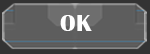
<style>
.page{position:relative;width:150px;height:54px;background:#5d5d5d}
.page>*{position:absolute;margin:0}
.t1{font:24px "BritannicBold";color:#ffffff}
</style>
<div class="page">
<p class="t1" style="left:60px;top:15px;width:32px;height:16px">OK</p>
</div>
